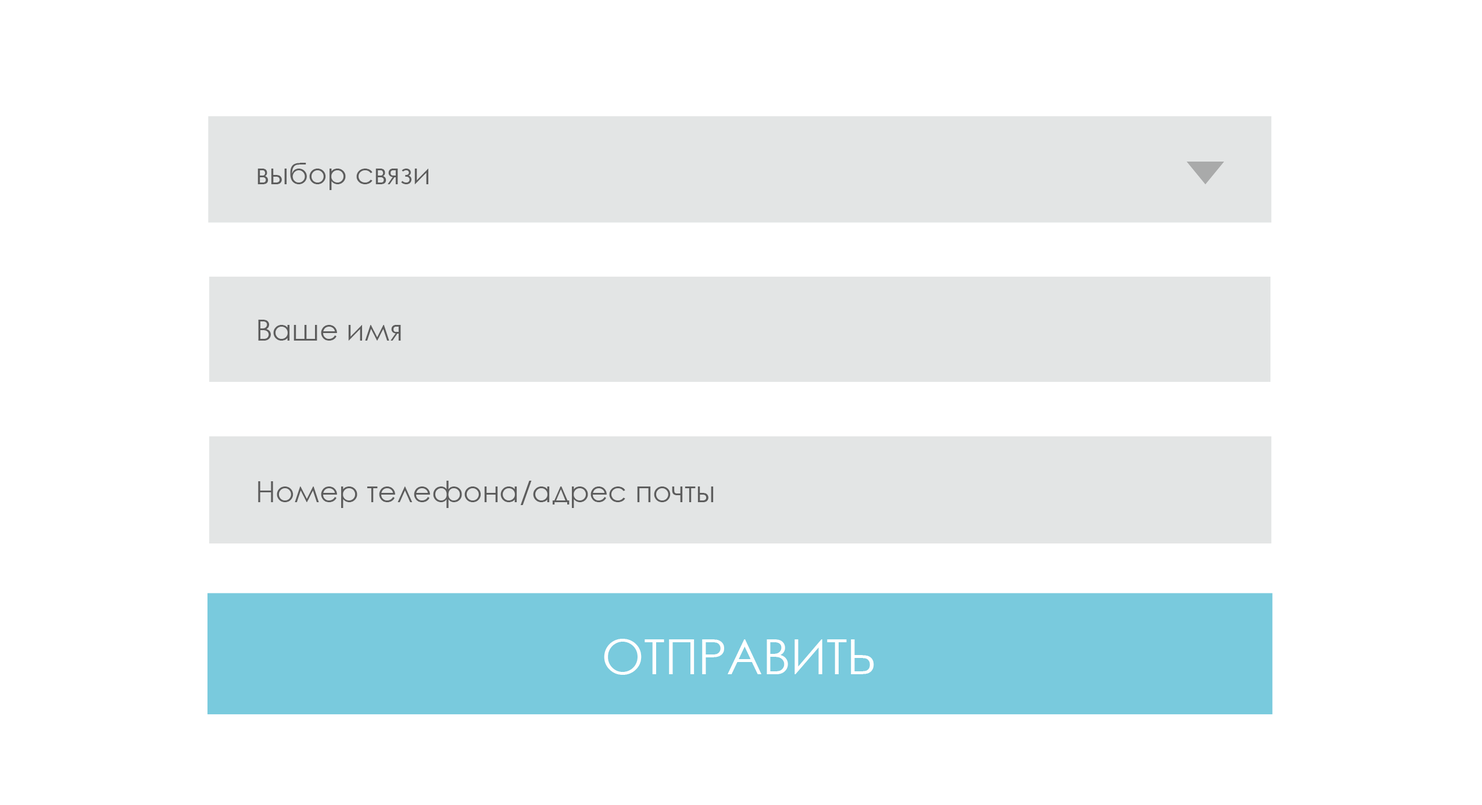
<style>
.page{position:relative;width:1482px;height:805px;background:#ffffff}
.page>*{position:absolute;margin:0}
.t1{font:29.1px "CenturyGothic";color:#5d5d5d}
.t2{font:48.5px "CenturyGothic";color:#ffffff}
</style>
<div class="page">
<p class="t1" style="left:257px;top:163px;width:171px;height:27px">выбор связи</p>
<p class="t1" style="left:258px;top:320px;width:143px;height:21px">Ваше имя</p>
<p class="t1" style="left:258px;top:481px;width:456px;height:27px">Номер телефона/адрес почты</p>
<p class="t2" style="left:604px;top:639px;width:270px;height:36px">ОТПРАВИТЬ</p>
</div>
